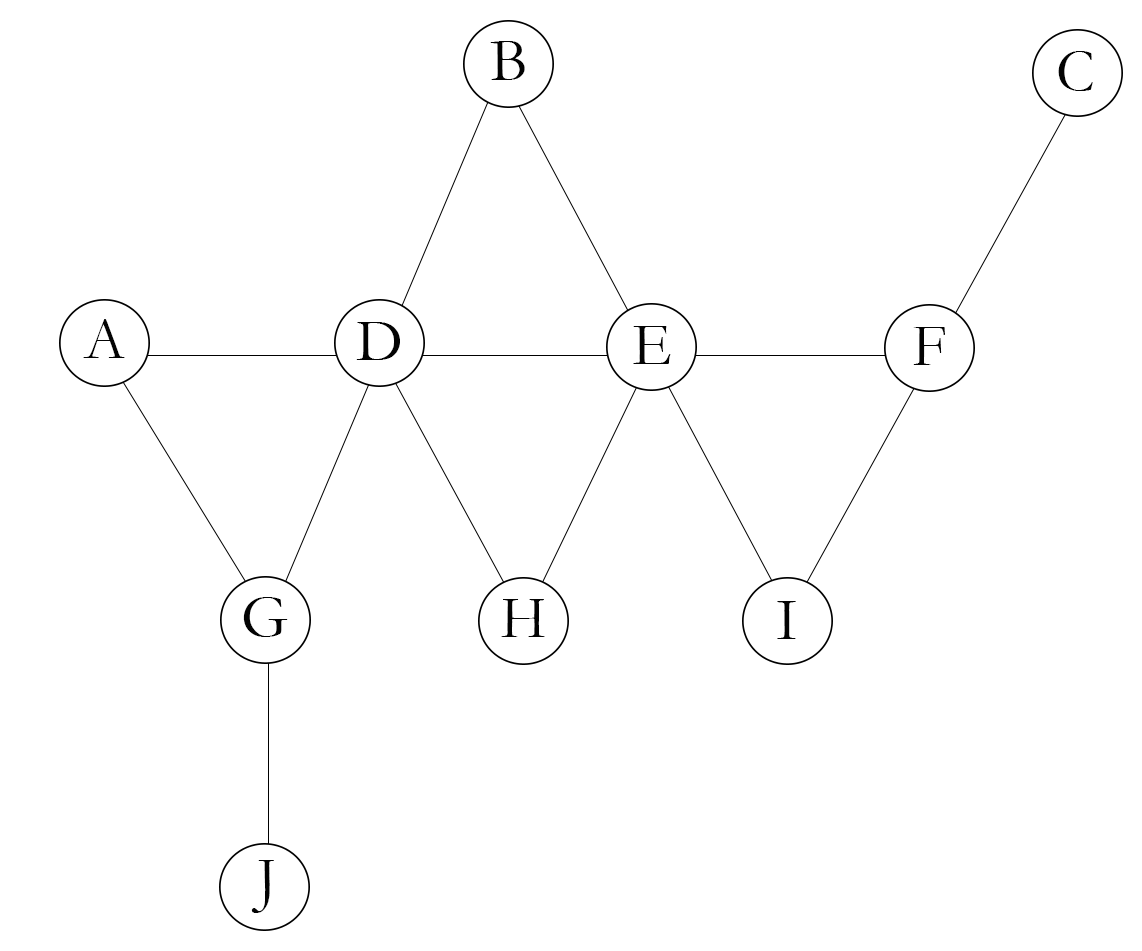
<style>
.page{position:relative;width:1142px;height:951px;background:#ffffff}
.page>*{position:absolute;margin:0}
.t1{font:61.1px "Garamond";color:#030303}
</style>
<div class="page">
<p class="t1" style="left:490px;top:41px;width:35px;height:39px">B</p>
<p class="t1" style="left:1058px;top:51px;width:35px;height:40px">C</p>
<p class="t1" style="left:83px;top:319px;width:42px;height:39px">A</p>
<p class="t1" style="left:356px;top:322px;width:44px;height:38px">D</p>
<p class="t1" style="left:633px;top:326px;width:38px;height:38px">E</p>
<p class="t1" style="left:913px;top:327px;width:32px;height:38px">F</p>
<p class="t1" style="left:243px;top:597px;width:45px;height:40px">G</p>
<p class="t1" style="left:501px;top:599px;width:44px;height:38px">H</p>
<p class="t1" style="left:777px;top:601px;width:19px;height:38px">I</p>
<p class="t1" style="left:251px;top:860px;width:23px;height:53px">J</p>
</div>
